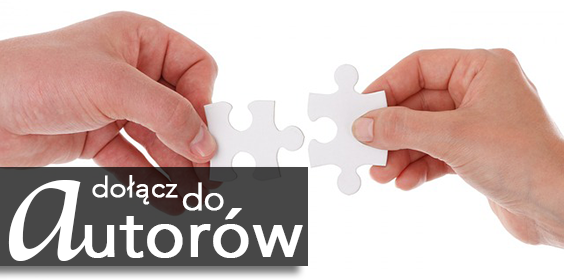
<style>
.page{position:relative;width:564px;height:280px;background:#ffffff}
.page>*{position:absolute;margin:0}
.t1{font:171.6px "Apple-Chancery";color:#ffffff}
.t2{font:28.7px "Avenir-Light";color:#ffffff;font-weight:bold}
.t3{font:35.8px "Avenir-Light";color:#ffffff;font-weight:bold}
.t4{font:67.2px "Avenir-Roman";color:#ffffff;font-weight:bold}
</style>
<div class="page">
<p class="t1" style="left:8px;top:180px;width:82px;height:81px">a</p>
<p class="t2" style="left:92px;top:175px;width:86px;height:30px">dołącz</p>
<p class="t3" style="left:182px;top:182px;width:42px;height:29px">do</p>
<p class="t4" style="left:84px;top:208px;width:219px;height:50px">utorów</p>
</div>
